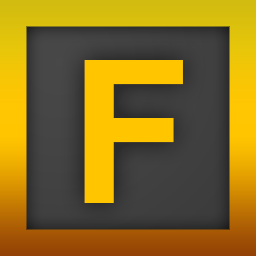
<style>
.page{position:relative;width:256px;height:256px}
.page>*{position:absolute;margin:0}
.t1{font:199.9px "Arial-BoldMT";letter-spacing:-0.08em;color:#ffc600}
</style>
<div class="page">
<p class="t1" style="left:84px;top:60px;width:99px;height:143px">F</p>
</div>
